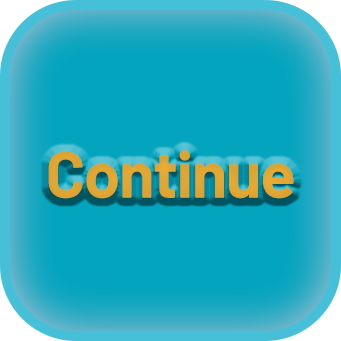
<style>
.page{position:relative;width:341px;height:341px;background:#03a4be}
.page>*{position:absolute;margin:0}
.t1{font:65px "Barlow-Bold";letter-spacing:-0.02em;color:#f7b432}
</style>
<div class="page">
<p class="t1" style="left:48px;top:150px;width:246px;height:49px">Continue</p>
</div>
